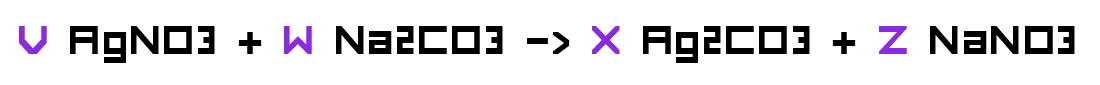
<style>
.page{position:relative;width:1100px;height:85px;background:#ffffff}
.page>*{position:absolute;margin:0}
.t1{font:53px "FORCED-SQUARE";color:#000000}
.t2{font:53px "FORCED-SQUARE";color:#8a2be2}
</style>
<div class="page">
<p class="t1" style="left:19px;top:26px;width:1056px;height:37px"><span class="t2">V</span> AgNO3 + <span class="t2">W </span>Na2CO3 -&gt; <span class="t2">X</span> Ag2CO3 + <span class="t2">Z </span>NaNO3</p>
</div>
